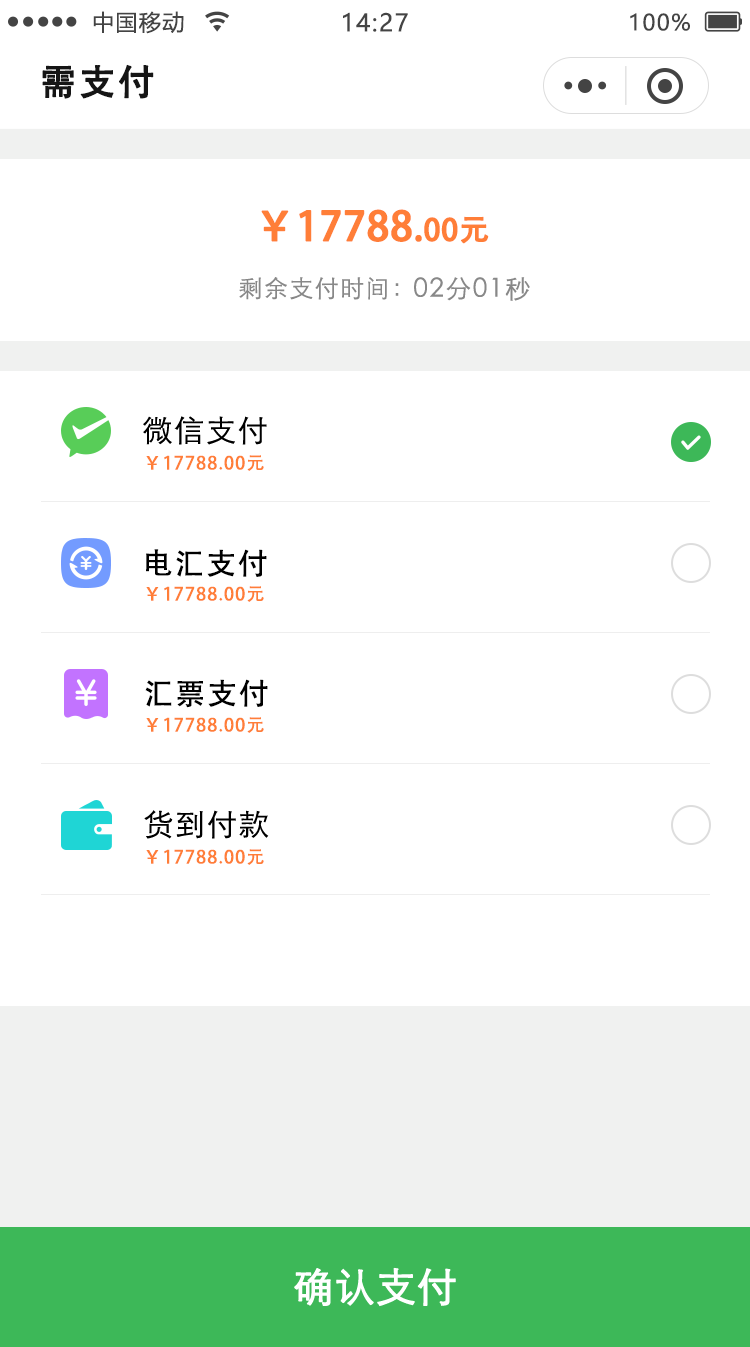
<style>
.page{position:relative;width:750px;height:1347px;background:#ffffff}
.page>*{position:absolute;margin:0}
.t1{font:22px "MicrosoftYaHei";letter-spacing:0.06em;color:#444444}
.t2{font:24px "MicrosoftYaHei";letter-spacing:0.06em;color:#444444}
.t3{font:36px "AdobeHeitiStd-Regular";letter-spacing:0.06em;color:#151515;font-weight:bold}
.t4{font:40px "AdobeHeitiStd-Regular";color:#ff7e38;font-weight:bold}
.t5{font:36px "AdobeHeitiStd-Regular";color:#ff7e38;font-weight:bold}
.t6{font:30px "AdobeHeitiStd-Regular";color:#ff7e38;font-weight:bold}
.t7{font:24px "STXihei";letter-spacing:0.06em;color:#888888}
.t8{font:26px "STXihei";letter-spacing:0.06em;color:#888888}
.t9{font:30px "STXihei";letter-spacing:0.06em;color:#000000}
.t10{font:18px "AdobeHeitiStd-Regular";letter-spacing:0.06em;color:#ff7e38}
.t11{font:30px "AdobeHeitiStd-Regular";letter-spacing:0.06em;color:#000000}
.t12{font:40px "STXihei";color:#ffffff;font-weight:bold}
</style>
<div class="page">
<p class="t1" style="left:93px;top:11px;width:91px;height:23px">中国移动</p>
<p class="t2" style="left:343px;top:12px;width:65px;height:20px">14:27</p>
<p class="t1" style="left:630px;top:13px;width:60px;height:18px">100%</p>
<p class="t3" style="left:42px;top:64px;width:112px;height:35px">需支付</p>
<p class="t4" style="left:261px;top:209px;width:228px;height:35px">￥17788<span class="t5">.</span><span class="t6">00元</span></p>
<p class="t7" style="left:239px;top:277px;width:160px;height:23px">剩余支付时间：</p>
<p class="t8" style="left:414px;top:277px;width:116px;height:24px">02分01秒</p>
<p class="t9" style="left:143px;top:416px;width:124px;height:29px">微信支付</p>
<p class="t10" style="left:146px;top:455px;width:118px;height:16px">￥17788.00元</p>
<p class="t11" style="left:146px;top:549px;width:121px;height:28px">电汇支付</p>
<p class="t10" style="left:146px;top:586px;width:118px;height:16px">￥17788.00元</p>
<p class="t11" style="left:145px;top:679px;width:123px;height:29px">汇票支付</p>
<p class="t10" style="left:146px;top:717px;width:118px;height:16px">￥17788.00元</p>
<p class="t9" style="left:144px;top:810px;width:125px;height:29px">货到付款</p>
<p class="t10" style="left:146px;top:849px;width:118px;height:16px">￥17788.00元</p>
<p class="t12" style="left:294px;top:1267px;width:162px;height:40px">确认支付</p>
</div>
